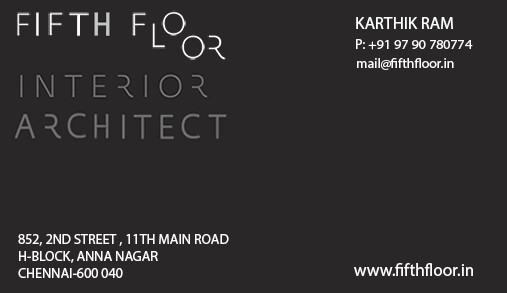
<style>
.page{position:relative;width:507px;height:293px;background:#292728}
.page>*{position:absolute;margin:0}
.t1{font:17px "MyriadPro-Regular";color:#ffffff;text-transform:uppercase}
.t2{font:13.8px "MyriadPro-Regular";color:#ffffff}
.t3{font:14px "MyriadPro-Regular";color:#ffffff}
.t4{font:17.5px "MyriadPro-Regular";color:#ffffff}
</style>
<div class="page">
<p class="t1" style="left:356px;top:17px;width:97px;height:12px">karthik ram</p>
<p class="t2" style="left:356px;top:39px;width:117px;height:11px">P: +91 97 90 780774</p>
<p class="t2" style="left:357px;top:58px;width:97px;height:12px">mail@fifthfloor.in</p>
<p class="t3" style="left:18px;top:234px;width:211px;height:44px">852, 2ND STREET , 11TH MAIN ROAD<br>H-BLOCK, ANNA NAGAR<br>CHENNAI-600 040</p>
<p class="t4" style="left:354px;top:263px;width:119px;height:13px">www.fifthfloor.in</p>
</div>
